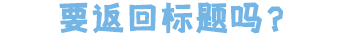
<style>
.page{position:relative;width:342px;height:36px;background:#ffffff}
.page>*{position:absolute;margin:0}
.t1{font:33.7px "shetumodengxiaofangti";color:#73b5e4;font-weight:bold}
</style>
<div class="page">
<p class="t1" style="left:59px;top:2px;width:224px;height:32px">要返回标题吗？</p>
</div>
